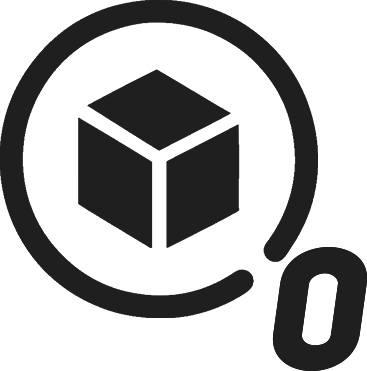
<style>
.page{position:relative;width:367px;height:371px;background:#ffffff}
.page>*{position:absolute;margin:0}
.t1{font:168.9px "UniSansHeavyCapsItalic";color:#1f1f1f}
</style>
<div class="page">
<p class="t1" style="left:272px;top:247px;width:96px;height:125px">0</p>
</div>
